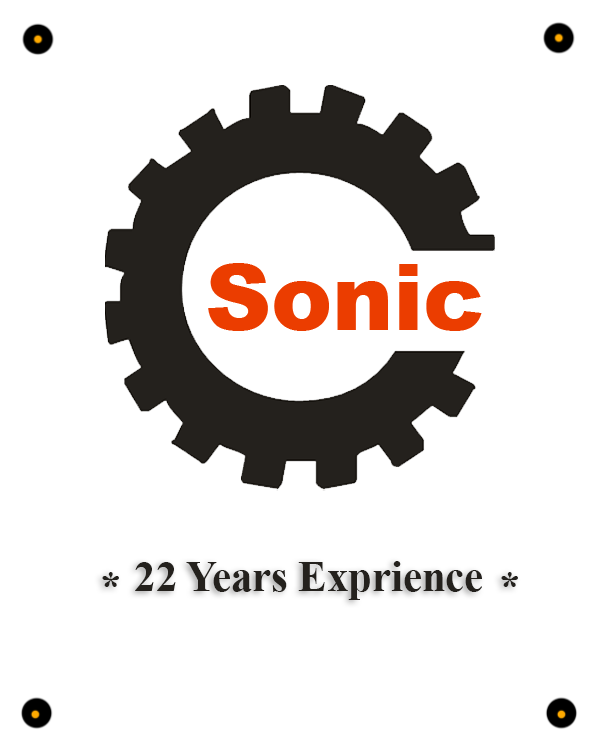
<style>
.page{position:relative;width:602px;height:751px;background:#ffffff}
.page>*{position:absolute;margin:0}
.t1{font:42.6px "TimesNewRomanPS-BoldMT";color:#24211d}
</style>
<div class="page">
<p class="t1" style="left:135px;top:561px;width:347px;height:39px">22 Years Exprience</p>
<p class="t1" style="left:102px;top:572px;width:17px;height:15px">*</p>
<p class="t1" style="left:501px;top:572px;width:17px;height:15px">*</p>
</div>
